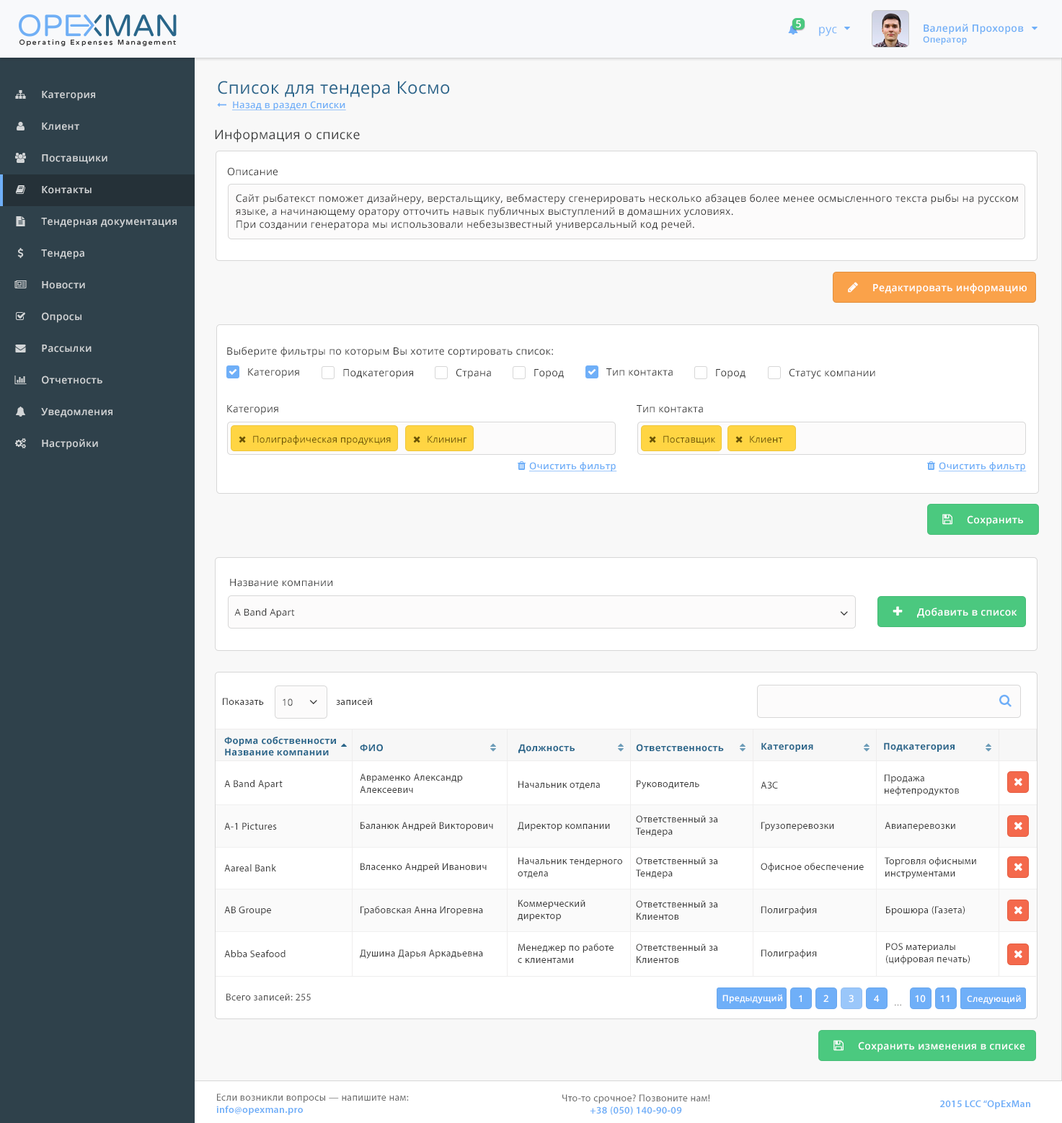
<style>
.page{position:relative;width:1062px;height:1123px;background:#ffffff}
.page>*{position:absolute;margin:0}
.t1{font:10.1px "OpenSans-Semibold";letter-spacing:0.025em;color:#ffffff}
.t2{font:11.5px "OpenSans";letter-spacing:0.025em;color:#6eaff8}
.t3{font:10.1px "OpenSans-Semibold";letter-spacing:0.025em;color:#6eaef7}
.t4{font:8.6px "OpenSans-Semibold";letter-spacing:0.025em;color:#6eaef7}
.t5{font:17.2px "OpenSans";letter-spacing:0.025em;color:#29658b}
.t6{font:10.1px "OpenSans-Semibold";letter-spacing:0.025em;color:#d2d5d7}
.t7{font:9.3px "OpenSans-Semibold";letter-spacing:0.025em;color:#6faff8;text-decoration:underline}
.t8{font:12.9px "OpenSans";letter-spacing:0.025em;color:#373838}
.t9{font:10.1px "OpenSans";letter-spacing:0.025em;color:#333333}
.t10{font:10.1px/12.9px "OpenSans";letter-spacing:0.025em;color:#333333}
.t11{font:9.3px "OpenSans";letter-spacing:0.025em;color:#6b5405}
.t12{font:9.4px "OpenSans-Semibold";letter-spacing:0.025em;color:#6faff8;text-decoration:underline}
.t13{font:10.1px "OpenSans";letter-spacing:0.025em;color:#373838}
.t14{font:9.3px "OpenSans";letter-spacing:0.025em;color:#333333}
.t15{font:10.1px "MyriadPro-Regular";letter-spacing:0.025em;color:#333333}
.t16{font:9.3px "OpenSans-Bold";letter-spacing:0.025em;color:#29668b}
.t17{font:10.1px "MyriadPro-Regular";letter-spacing:0.025em;color:#3a3a3a}
.t18{font:10.1px "MyriadPro-Regular";letter-spacing:0.025em;color:#4c4c4c}
.t19{font:8.6px "OpenSans-Semibold";letter-spacing:0.025em;color:#ffffff}
.t20{font:9.3px "OpenSans-Semibold";letter-spacing:0.025em;color:#ffffff}
.t21{font:9.3px "OpenSans";letter-spacing:0.025em;color:#999999}
.t22{font:10.1px "MyriadPro-Regular";letter-spacing:0.025em;color:#696969}
.t23{font:10.1px "MyriadPro-Semibold";letter-spacing:0.025em;color:#6eaef8}
</style>
<div class="page">
<p class="t1" style="left:796px;top:20px;width:5px;height:8px">5</p>
<p class="t2" style="left:819px;top:27px;width:18px;height:9px">рус</p>
<p class="t3" style="left:923px;top:24px;width:101px;height:21px">Валерий Прохоров<br><span class="t4">Оператор</span></p>
<p class="t5" style="left:218px;top:81px;width:232px;height:17px">Список для тендера Космо</p>
<p class="t6" style="left:42px;top:91px;width:53px;height:10px">Категория</p>
<p class="t7" style="left:232px;top:101px;width:114px;height:9px">Назад в раздел Списки</p>
<p class="t6" style="left:42px;top:123px;width:37px;height:7px">Клиент</p>
<p class="t8" style="left:215px;top:129px;width:145px;height:14px">Информация о списке</p>
<p class="t6" style="left:42px;top:154px;width:65px;height:10px">Поставщики</p>
<p class="t9" style="left:227px;top:167px;width:51px;height:9px">Описание</p>
<p class="t6" style="left:42px;top:186px;width:50px;height:8px">Контакты</p>
<p class="t10" style="left:236px;top:194px;width:782px;height:37px;text-align:justify">Сайт рыбатекст поможет дизайнеру, верстальщику, вебмастеру сгенерировать несколько абзацев более менее осмысленного текста рыбы на русском языке, а начинающему оратору отточить навык публичных выступлений в домашних условиях.<br>При создании генератора мы использовали небезызвестный универсальный код речей.</p>
<p class="t6" style="left:41px;top:218px;width:136px;height:10px">Тендерная документация</p>
<p class="t6" style="left:41px;top:249px;width:43px;height:10px">Тендера</p>
<p class="t6" style="left:42px;top:281px;width:43px;height:8px">Новости</p>
<p class="t1" style="left:873px;top:283px;width:153px;height:11px">Редактировать информацию</p>
<p class="t6" style="left:42px;top:312px;width:39px;height:11px">Опросы</p>
<p class="t6" style="left:42px;top:345px;width:50px;height:7px">Рассылки</p>
<p class="t9" style="left:227px;top:347px;width:326px;height:11px">Выберите фильтры по которым Вы хотите сортировать список:</p>
<p class="t6" style="left:42px;top:376px;width:60px;height:8px">Отчетность</p>
<p class="t9" style="left:248px;top:368px;width:51px;height:10px">Категория</p>
<p class="t9" style="left:343px;top:369px;width:70px;height:10px">Подкатегория</p>
<p class="t9" style="left:456px;top:368px;width:35px;height:11px">Страна</p>
<p class="t9" style="left:534px;top:369px;width:30px;height:10px">Город</p>
<p class="t9" style="left:606px;top:368px;width:67px;height:8px">Тип контакта</p>
<p class="t9" style="left:716px;top:369px;width:29px;height:10px">Город</p>
<p class="t9" style="left:789px;top:368px;width:86px;height:11px">Статус компании</p>
<p class="t6" style="left:41px;top:408px;width:71px;height:9px">Уведомления</p>
<p class="t9" style="left:227px;top:405px;width:51px;height:10px">Категория</p>
<p class="t9" style="left:636px;top:405px;width:67px;height:8px">Тип контакта</p>
<p class="t11" style="left:253px;top:435px;width:138px;height:10px">Полиграфическая продукция</p>
<p class="t11" style="left:427px;top:435px;width:40px;height:8px">Клининг</p>
<p class="t11" style="left:663px;top:435px;width:52px;height:10px">Поставщик</p>
<p class="t11" style="left:750px;top:435px;width:33px;height:8px">Клиент</p>
<p class="t6" style="left:42px;top:439px;width:56px;height:11px">Настройки</p>
<p class="t12" style="left:529px;top:462px;width:88px;height:9px">Очистить фильтр</p>
<p class="t12" style="left:939px;top:462px;width:87px;height:9px">Очистить фильтр</p>
<p class="t1" style="left:967px;top:515px;width:56px;height:11px">Сохранить</p>
<p class="t13" style="left:230px;top:579px;width:102px;height:8px">Название компании</p>
<p class="t14" style="left:234px;top:608px;width:61px;height:10px">A Band Apart</p>
<p class="t1" style="left:917px;top:608px;width:100px;height:10px">Добавить в список</p>
<p class="t15" style="left:223px;top:698px;width:41px;height:7px">Показать</p>
<p class="t14" style="left:283px;top:698px;width:10px;height:8px">10</p>
<p class="t15" style="left:336px;top:698px;width:36px;height:7px">записей</p>
<p class="t16" style="left:224px;top:737px;width:112px;height:19px">Форма собственности<br>Название компании</p>
<p class="t16" style="left:360px;top:744px;width:23px;height:8px">ФИО</p>
<p class="t16" style="left:518px;top:744px;width:57px;height:9px">Должность</p>
<p class="t16" style="left:636px;top:744px;width:88px;height:8px">Ответственность</p>
<p class="t16" style="left:761px;top:742px;width:52px;height:10px">Категория</p>
<p class="t16" style="left:884px;top:742px;width:70px;height:10px">Подкатегория</p>
<p class="t17" style="left:360px;top:773px;width:103px;height:20px">Авраменко Александр <br>Алексеевич</p>
<p class="t17" style="left:224px;top:780px;width:59px;height:9px">A Band Apart</p>
<p class="t17" style="left:518px;top:781px;width:82px;height:9px">Начальник отдела</p>
<p class="t17" style="left:636px;top:780px;width:63px;height:9px">Руководитель</p>
<p class="t17" style="left:760px;top:781px;width:18px;height:8px">АЗС</p>
<p class="t17" style="left:884px;top:774px;width:75px;height:22px">Продажа <br>нефтепродуктов</p>
<p class="t17" style="left:360px;top:822px;width:133px;height:9px">Баланюк Андрей Викторович</p>
<p class="t17" style="left:518px;top:822px;width:92px;height:9px">Директор компании</p>
<p class="t17" style="left:636px;top:815px;width:81px;height:22px">Ответственный за <br>Тендера</p>
<p class="t17" style="left:761px;top:822px;width:73px;height:9px">Грузоперевозки</p>
<p class="t17" style="left:884px;top:822px;width:71px;height:9px">Авиаперевозки</p>
<p class="t17" style="left:224px;top:822px;width:53px;height:8px">A-1 Pictures</p>
<p class="t17" style="left:518px;top:857px;width:104px;height:22px">Начальник тендерного <br>отдела</p>
<p class="t17" style="left:636px;top:857px;width:81px;height:22px">Ответственный за <br>Тендера</p>
<p class="t17" style="left:884px;top:857px;width:92px;height:22px">Торговля офисными<br>инструментами</p>
<p class="t17" style="left:224px;top:864px;width:52px;height:7px">Aareal Bank</p>
<p class="t17" style="left:360px;top:863px;width:127px;height:9px">Власенко Андрей Иванович</p>
<p class="t17" style="left:760px;top:863px;width:104px;height:9px">Офисное обеспечение</p>
<p class="t17" style="left:518px;top:900px;width:67px;height:21px">Коммерческий <br>директор</p>
<p class="t17" style="left:636px;top:900px;width:81px;height:20px">Ответственный за <br>Клиентов</p>
<p class="t17" style="left:224px;top:906px;width:47px;height:9px">AB Groupe</p>
<p class="t17" style="left:360px;top:906px;width:123px;height:9px">Грабовская Анна Игоревна</p>
<p class="t17" style="left:761px;top:906px;width:56px;height:9px">Полиграфия</p>
<p class="t17" style="left:886px;top:906px;width:78px;height:9px">Брошюра (Газета)</p>
<p class="t17" style="left:224px;top:950px;width:61px;height:7px">Abba Seafood</p>
<p class="t17" style="left:360px;top:949px;width:123px;height:10px">Душина Дарья Аркадьевна</p>
<p class="t17" style="left:518px;top:944px;width:95px;height:19px">Менеджер по работе <br>с клиентами</p>
<p class="t17" style="left:636px;top:944px;width:81px;height:19px">Ответственный за <br>Клиентов</p>
<p class="t17" style="left:761px;top:949px;width:56px;height:10px">Полиграфия</p>
<p class="t17" style="left:886px;top:943px;width:84px;height:21px">POS материалы<br>(цифровая печать)</p>
<p class="t18" style="left:226px;top:993px;width:85px;height:8px">Всего записей: 255</p>
<p class="t19" style="left:722px;top:994px;width:60px;height:9px">Предыдущий</p>
<p class="t20" style="left:799px;top:995px;width:3px;height:7px">1</p>
<p class="t20" style="left:823px;top:995px;width:5px;height:7px">2</p>
<p class="t20" style="left:848px;top:995px;width:5px;height:8px">3</p>
<p class="t20" style="left:874px;top:995px;width:5px;height:7px">4</p>
<p class="t20" style="left:915px;top:995px;width:11px;height:8px">10</p>
<p class="t20" style="left:940px;top:995px;width:9px;height:7px">11</p>
<p class="t19" style="left:967px;top:995px;width:54px;height:9px">Следующий</p>
<p class="t21" style="left:895px;top:1004px;width:6px;height:2px">...</p>
<p class="t1" style="left:858px;top:1042px;width:167px;height:10px">Сохранить изменения в списке</p>
<p class="t22" style="left:216px;top:1093px;width:193px;height:22px">Если возникли вопросы — напишите нам:<br><span class="t23">info@opexman.pro</span></p>
<p class="t22" style="left:562px;top:1094px;width:148px;height:21px;text-align:center">Что-то срочное? Позвоните нам!<br><span class="t23">+38 (050) 140-90-09</span></p>
<p class="t23" style="left:940px;top:1100px;width:90px;height:9px">2015 LCC “OpExMan</p>
</div>
